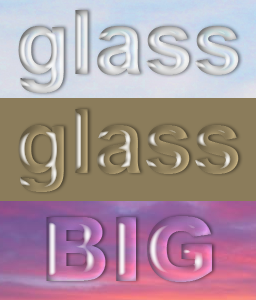
<style>
.page{position:relative;width:256px;height:300px}
.page>*{position:absolute;margin:0}
.t1{font:88.9px "Arial-BoldMT"}
.t2{font:88.9px "Arial-Black"}
</style>
<div class="page">
<p class="t1" style="left:18px;top:109px;width:221px;height:83px">glass</p>
<p class="t2" style="left:46px;top:216px;width:166px;height:66px">BIG</p>
</div>
